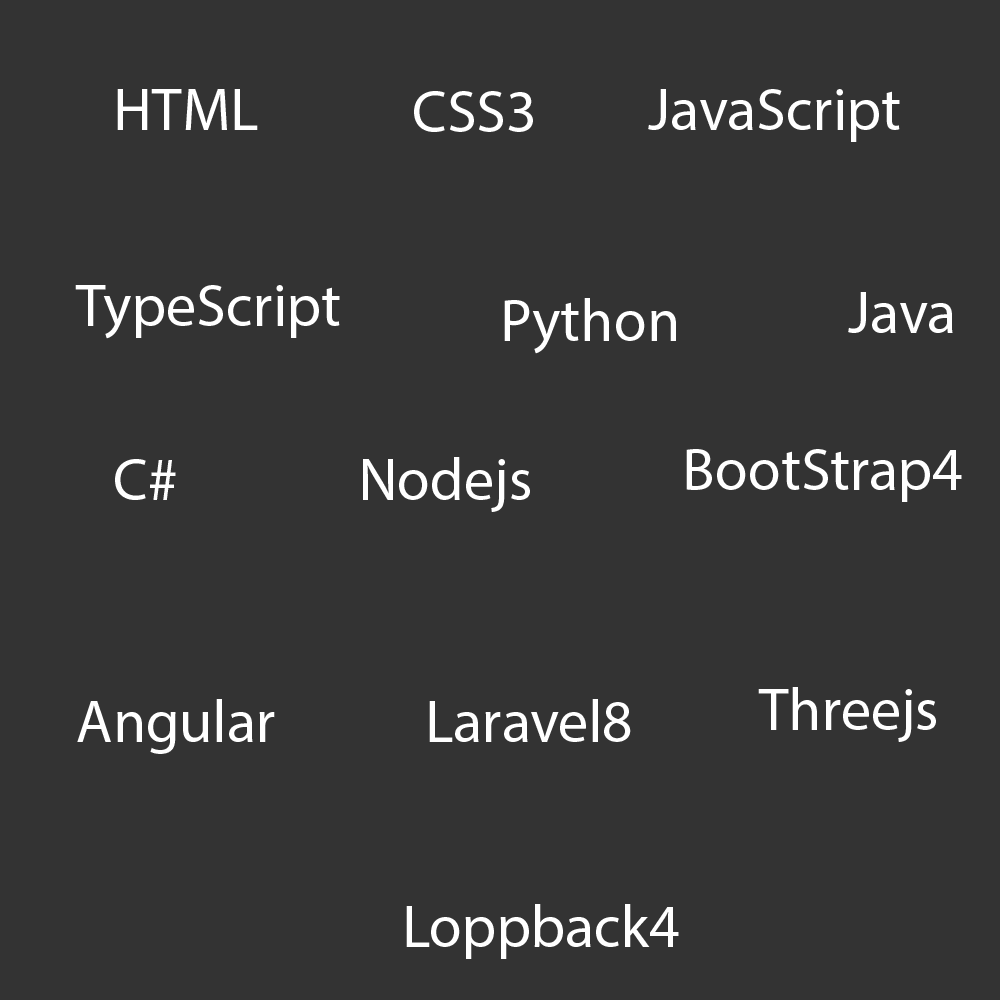
<style>
.page{position:relative;width:1000px;height:1000px;background:#333333}
.page>*{position:absolute;margin:0}
.t1{font:60px "MyriadPro-Regular";color:#ffffff}
</style>
<div class="page">
<p class="t1" style="left:117px;top:89px;width:141px;height:41px">HTML</p>
<p class="t1" style="left:648px;top:89px;width:252px;height:53px">JavaScript</p>
<p class="t1" style="left:414px;top:91px;width:119px;height:41px">CSS3</p>
<p class="t1" style="left:75px;top:285px;width:265px;height:54px">TypeScript</p>
<p class="t1" style="left:848px;top:292px;width:105px;height:41px">Java</p>
<p class="t1" style="left:504px;top:298px;width:172px;height:56px">Python</p>
<p class="t1" style="left:686px;top:449px;width:276px;height:53px">BootStrap4</p>
<p class="t1" style="left:115px;top:459px;width:61px;height:41px">C#</p>
<p class="t1" style="left:363px;top:457px;width:167px;height:55px">Nodejs</p>
<p class="t1" style="left:758px;top:687px;width:178px;height:55px">Threejs</p>
<p class="t1" style="left:77px;top:699px;width:198px;height:55px">Angular</p>
<p class="t1" style="left:429px;top:699px;width:202px;height:43px">Laravel8</p>
<p class="t1" style="left:406px;top:904px;width:273px;height:55px">Loppback4</p>
</div>
